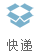
<style>
.page{position:relative;width:40px;height:55px;background:#ffffff}
.page>*{position:absolute;margin:0}
.t1{font:22.5px "SimSun";letter-spacing:0.1em;color:#666666;font-variant:small-caps}
</style>
<div class="page">
<p class="t1" style="left:7px;top:39px;width:25px;height:12px">快递</p>
</div>
